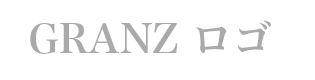
<style>
.page{position:relative;width:315px;height:80px;background:#ffffff}
.page>*{position:absolute;margin:0}
.t1{font:40px "HiraMinProN-W6";color:#aaaaaa}
</style>
<div class="page">
<p class="t1" style="left:30px;top:20px;width:241px;height:34px">GRANZ ロゴ</p>
</div>
